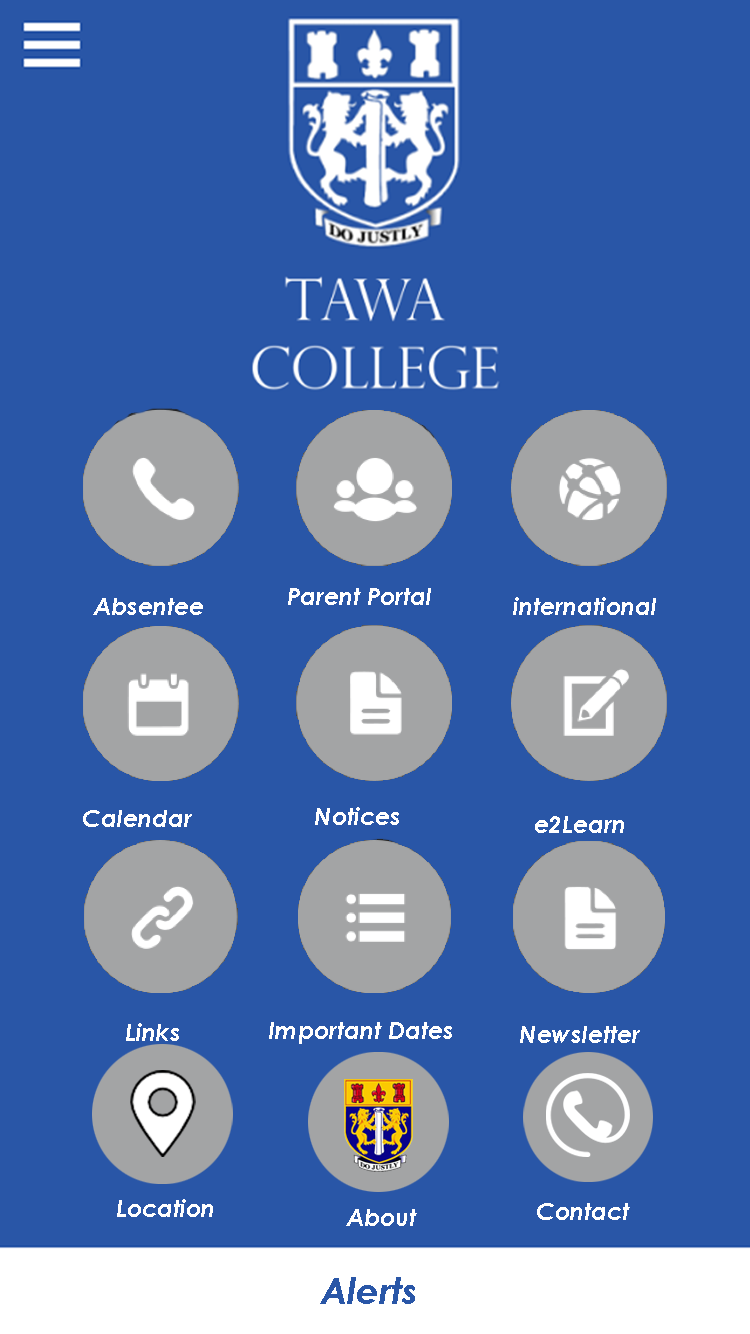
<style>
.page{position:relative;width:750px;height:1334px;background:#2956a7}
.page>*{position:absolute;margin:0}
.t1{font:24px "CenturyGothic-BoldItalic";color:#ffffff}
.t2{font:36px "CenturyGothic-BoldItalic";color:#2956a7}
</style>
<div class="page">
<p class="t1" style="left:288px;top:588px;width:143px;height:17px">Parent Portal</p>
<p class="t1" style="left:93px;top:598px;width:110px;height:17px">Absentee</p>
<p class="t1" style="left:513px;top:597px;width:143px;height:18px">international</p>
<p class="t1" style="left:315px;top:807px;width:84px;height:18px">Notices</p>
<p class="t1" style="left:83px;top:810px;width:109px;height:17px">Calendar</p>
<p class="t1" style="left:535px;top:816px;width:89px;height:17px">e2Learn</p>
<p class="t1" style="left:126px;top:1023px;width:53px;height:18px">Links</p>
<p class="t1" style="left:269px;top:1022px;width:183px;height:22px">Important Dates</p>
<p class="t1" style="left:520px;top:1026px;width:120px;height:17px">Newsletter</p>
<p class="t1" style="left:117px;top:1199px;width:96px;height:18px">Location</p>
<p class="t1" style="left:537px;top:1203px;width:93px;height:17px">Contact</p>
<p class="t1" style="left:346px;top:1209px;width:71px;height:17px">About</p>
<p class="t2" style="left:320px;top:1277px;width:95px;height:27px">Alerts</p>
</div>
